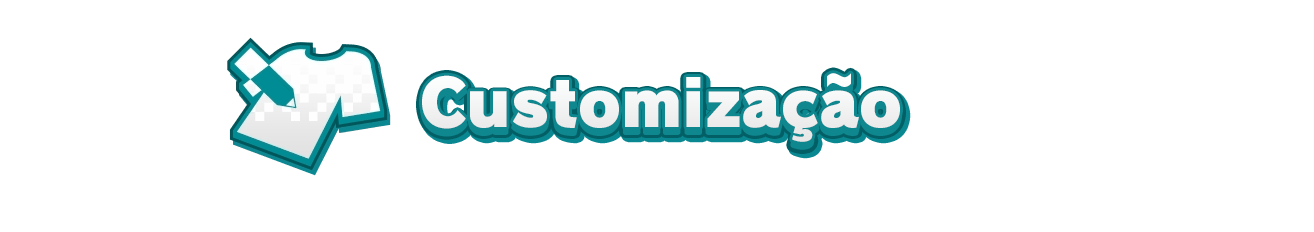
<style>
.page{position:relative;width:1314px;height:232px;background:#ffffff}
.page>*{position:absolute;margin:0}
.t1{font:69.5px "RodinPro-UB";color:#eff0f0;scale:0.92 1}
.t2{font:64px "RodinPro-UB";color:#f2f2f3}
</style>
<div class="page">
<p class="t1" style="left:422px;top:73px;width:478px;height:75px">Customização</p>
<p class="t2" style="left:422px;top:73px;width:478px;height:69px">Customização</p>
</div>
